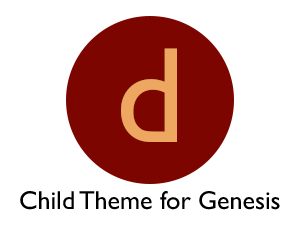
<style>
.page{position:relative;width:300px;height:225px;background:#ffffff}
.page>*{position:absolute;margin:0}
.t1{font:136.8px "GillSans";color:#eda761}
.t2{font:26.1px "GillSans";color:#000000}
</style>
<div class="page">
<p class="t1" style="left:121px;top:48px;width:56px;height:94px">d</p>
<p class="t2" style="left:20px;top:191px;width:260px;height:19px">Child Theme for Genesis</p>
</div>
